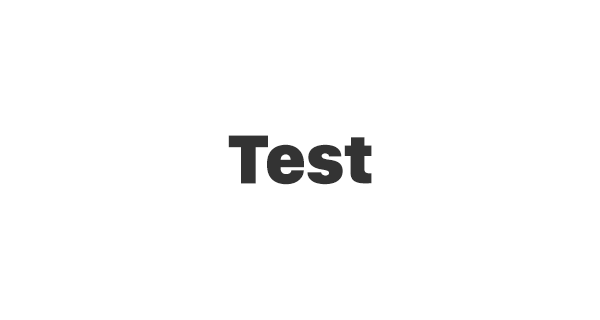
<style>
.page{position:relative;width:600px;height:320px;background:#ffffff}
.page>*{position:absolute;margin:0}
.t1{font:72px "SanFranciscoDisplay-Black";color:#333333}
</style>
<div class="page">
<p class="t1" style="left:228px;top:135px;width:144px;height:50px">Test</p>
</div>
